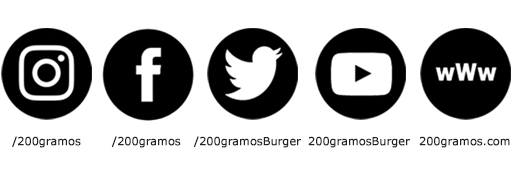
<style>
.page{position:relative;width:512px;height:192px;background:#ffffff}
.page>*{position:absolute;margin:0}
.t1{font:11px "Verdana";letter-spacing:-0.01em;color:#222222;font-weight:bold}
</style>
<div class="page">
<p class="t1" style="left:12px;top:136px;width:69px;height:12px">/200gramos</p>
<p class="t1" style="left:111px;top:136px;width:70px;height:12px">/200gramos</p>
<p class="t1" style="left:193px;top:136px;width:108px;height:12px">/200gramosBurger</p>
<p class="t1" style="left:308px;top:136px;width:102px;height:12px">200gramosBurger</p>
<p class="t1" style="left:419px;top:136px;width:91px;height:12px">200gramos.com</p>
</div>
